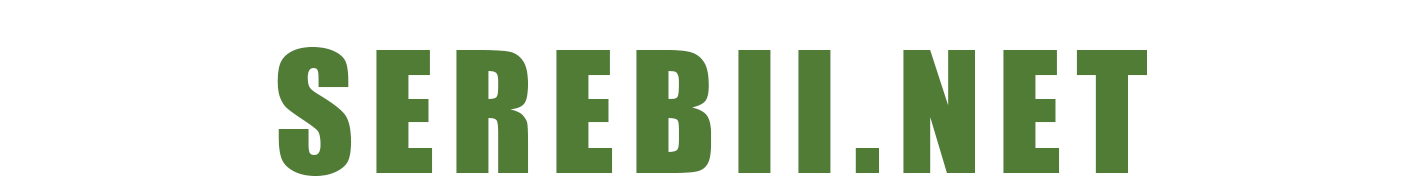
<style>
.page{position:relative;width:1423px;height:181px;background:#ffffff}
.page>*{position:absolute;margin:0}
.t1{font:155.9px "Impact";letter-spacing:0.1em;color:#507c36;text-transform:uppercase}
</style>
<div class="page">
<p class="t1" style="left:277px;top:47px;width:870px;height:129px">Serebii.net</p>
</div>
